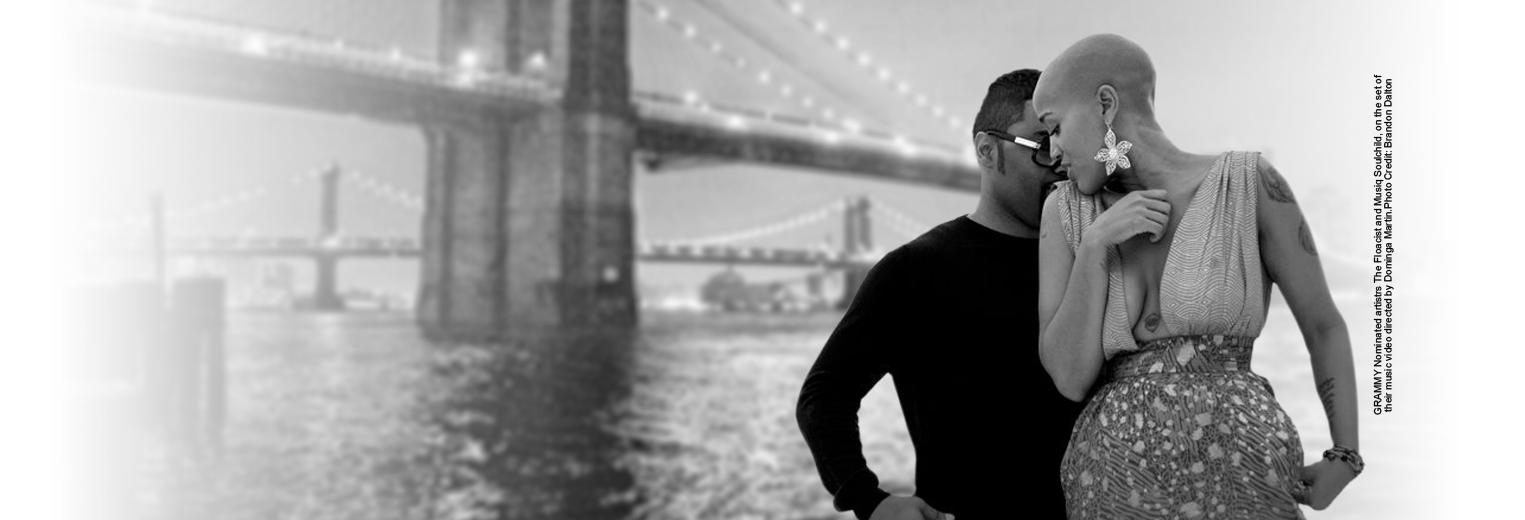
<style>
.page{position:relative;width:1525px;height:520px}
.page>*{position:absolute;margin:0}
.t1{font:10px "ArialMT";color:#000000}
</style>
<div class="page">
<p class="t1" style="left:1373px;top:74px;width:21px;height:341px;rotate:-90deg">GRAMMY Nominated artistrs The Floacist and Musiq Soulchild, on the set of their music video directed by Dominga Martin.Photo Credit: Brandon Dalton</p>
</div>
